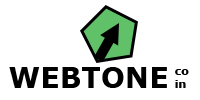
<style>
.page{position:relative;width:200px;height:100px;background:#ffffff}
.page>*{position:absolute;margin:0}
.t1{font:28.5px "Verdana-Bold";color:#000000}
.t2{font:11px "Verdana-Bold";color:#000000}
</style>
<div class="page">
<p class="t1" style="left:9px;top:67px;width:158px;height:21px">WEBTONE</p>
<p class="t2" style="left:175px;top:69px;width:14px;height:19px">co<br>in</p>
</div>
